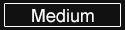
<style>
.page{position:relative;width:125px;height:30px;background:#111111}
.page>*{position:absolute;margin:0}
.t1{font:18px "ArialMT";color:#ffffff}
</style>
<div class="page">
<p class="t1" style="left:32px;top:9px;width:62px;height:14px">Medium</p>
</div>
